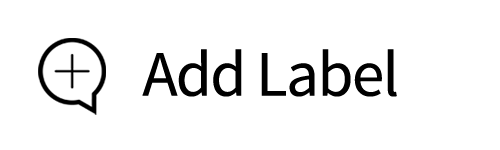
<style>
.page{position:relative;width:500px;height:150px;background:#ffffff}
.page>*{position:absolute;margin:0}
.t1{font:65px "SourceSansPro-Regular";letter-spacing:-0.025em;color:#000000}
</style>
<div class="page">
<p class="t1" style="left:142px;top:49px;width:255px;height:48px">Add Label</p>
</div>
